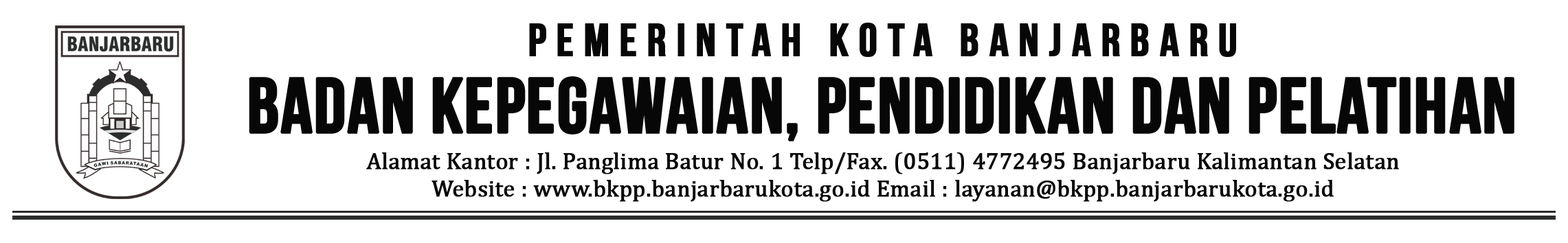
<style>
.page{position:relative;width:1568px;height:243px;background:#ffffff}
.page>*{position:absolute;margin:0}
.t1{font:23.2px/36.1px "Cambria";color:#070707;font-weight:bold}
.t2{font:46.4px/77.4px "BebasNeue";letter-spacing:0.2em;color:#070707;text-transform:uppercase;font-weight:bold}
.t3{font:77.4px/77.4px "BebasNeue";color:#070707;text-transform:uppercase;font-weight:bold}
.t4{font:77.4px/36.1px "BebasNeue";color:#070707;text-transform:uppercase;font-weight:bold}
.t5{font:23.2px "Cambria";color:#070707;font-weight:bold}
</style>
<div class="page">
<p class="t1" style="left:249px;top:23px;width:1265px;height:179px;text-align:center"><span class="t2">pemerintah kota banjarbaru<br></span><span class="t3">badan kepegawaian, pendidikan </span><span class="t4">dan pelatihan<br></span>Alamat Kantor : Jl. Panglima Batur No. 1 Telp/Fax. (0511) 4772495 Banjarbaru Kalimantan Selatan<br><span class="t5">Website : www.bkpp.banjarbarukota.go.id Email : layanan@bkpp.banjarbarukota.go.id</span></p>
</div>
